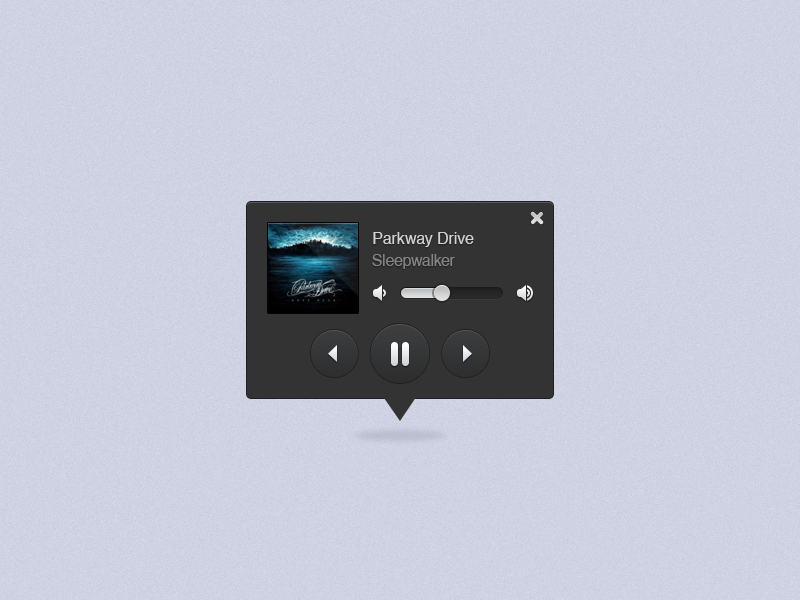
<style>
.page{position:relative;width:800px;height:600px}
.page>*{position:absolute;margin:0}
.t1{font:16px "HelveticaCE-Regular";color:#d3d3d6}
.t2{font:15.6px "HelveticaCE-Regular";color:#848587}
</style>
<div class="page">
<p class="t1" style="left:373px;top:232px;width:101px;height:15px">Parkway Drive</p>
<p class="t2" style="left:372px;top:254px;width:83px;height:15px">Sleepwalker</p>
</div>
